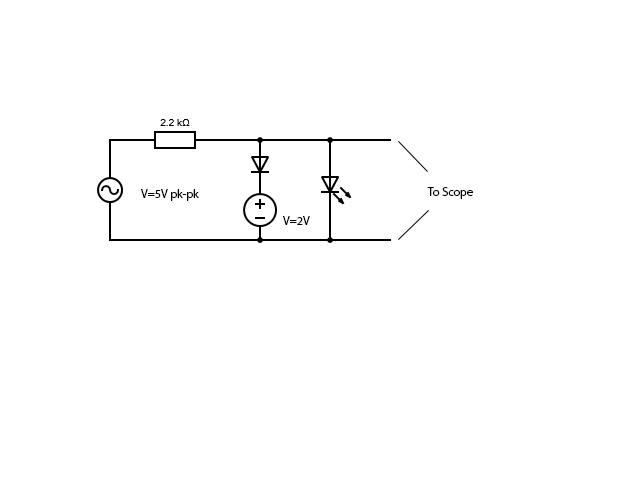
<style>
.page{position:relative;width:640px;height:480px;background:#ffffff}
.page>*{position:absolute;margin:0}
.t1{font:12px "MyriadPro-Regular";color:#000000}
</style>
<div class="page">
<p class="t1" style="left:141px;top:189px;width:58px;height:12px">V=5V pk-pk</p>
<p class="t1" style="left:427px;top:187px;width:46px;height:12px">To Scope</p>
<p class="t1" style="left:283px;top:216px;width:27px;height:9px">V=2V</p>
</div>
